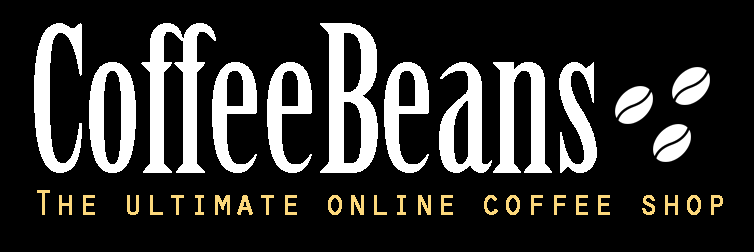
<style>
.page{position:relative;width:754px;height:252px;background:#000000}
.page>*{position:absolute;margin:0}
.t1{font:200px "BirchStd";color:#ffffff}
.t2{font:36px "OratorStd";color:#fcd77b;font-weight:bold}
</style>
<div class="page">
<p class="t1" style="left:34px;top:23px;width:563px;height:150px">CoffeeBeans</p>
<p class="t2" style="left:37px;top:190px;width:686px;height:25px">The ultimate online coffee shop</p>
</div>
